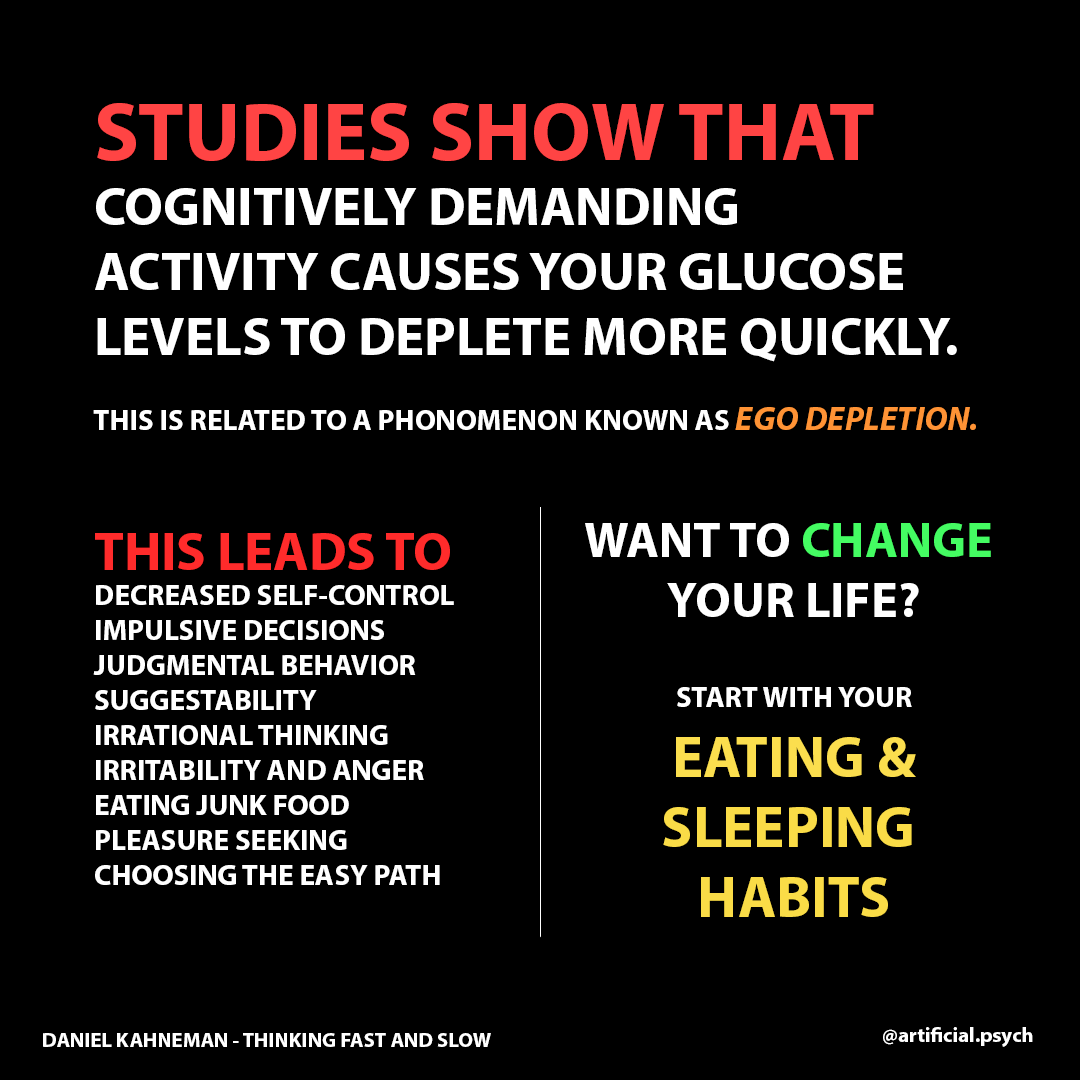
<style>
.page{position:relative;width:1080px;height:1080px;background:#000000}
.page>*{position:absolute;margin:0}
.t1{font:54.2px "MyriadPro-Bold";color:#ffffff}
.t2{font:83.3px "MyriadPro-Bold";color:#ff4444}
.t3{font:29.2px "MyriadPro-Bold";color:#ffffff}
.t4{font:33.3px "MyriadPro-BoldIt";color:#ff9335}
.t5{font:54.2px "MyriadPro-Bold";color:#ff2b2b}
.t6{font:50px "MyriadPro-Bold";color:#ffffff}
.t7{font:50px "MyriadPro-Bold";color:#44fc62}
.t8{font:58.3px "MyriadPro-Bold";color:#fadc47}
.t9{font:58.3px "MyriadPro-Bold";color:#fbde4e}
.t10{font:20.8px "MyriadPro-Bold";color:#ffffff}
</style>
<div class="page">
<p class="t1" style="left:93px;top:103px;width:883px;height:327px"><span class="t2">STUDIES SHOW THAT<br></span>COGNITIVELY DEMANDING <br>ACTIVITY CAUSES YOUR GLUCOSE<br>LEVELS TO DEPLETE MORE QUICKLY.<br><span class="t3"><br>THIS IS RELATED TO A PHONOMENON KNOWN AS </span><span class="t4">EGO DEPLETION.</span></p>
<p class="t3" style="left:93px;top:533px;width:361px;height:352px"><span class="t5">THIS LEADS TO<br></span>DECREASED SELF-CONTROL <br>IMPULSIVE DECISIONS <br>JUDGMENTAL BEHAVIOR <br>SUGGESTABILITY <br>IRRATIONAL THINKING<br>IRRITABILITY AND ANGER<br>EATING JUNK FOOD <br>PLEASURE SEEKING <br>CHOOSING THE EASY PATH</p>
<p class="t6" style="left:585px;top:523px;width:406px;height:94px;text-align:center">WANT TO <span class="t7">CHANGE <br></span>YOUR LIFE?</p>
<p class="t8" style="left:663px;top:687px;width:253px;height:230px;text-align:center"><span class="t3"><br>START WITH YOUR<br></span><span class="t9">EATING &amp;<br></span>SLEEPING <br>HABITS</p>
<p class="t10" style="left:43px;top:1033px;width:448px;height:14px">DANIEL KAHNEMAN - THINKING FAST AND SLOW</p>
<p class="t10" style="left:883px;top:1027px;width:150px;height:20px">@artificial.psych</p>
</div>
